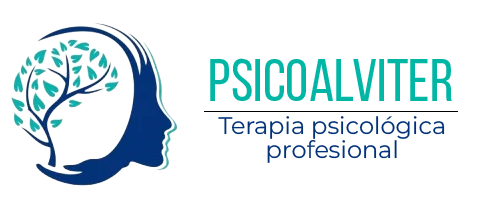
<style>
.page{position:relative;width:504px;height:212px;background:#ffffff}
.page>*{position:absolute;margin:0}
.t1{font:60px "BebasNeueRegular";color:#01b6a4}
.t2{font:24px/24px "Montserrat-Regular";color:#033279}
</style>
<div class="page">
<p class="t1" style="left:210px;top:58px;width:242px;height:43px">PsicoAlviter</p>
<p class="t2" style="left:218px;top:116px;width:227px;height:47px;text-align:center">Terapia psicológica<br>profesional</p>
</div>
